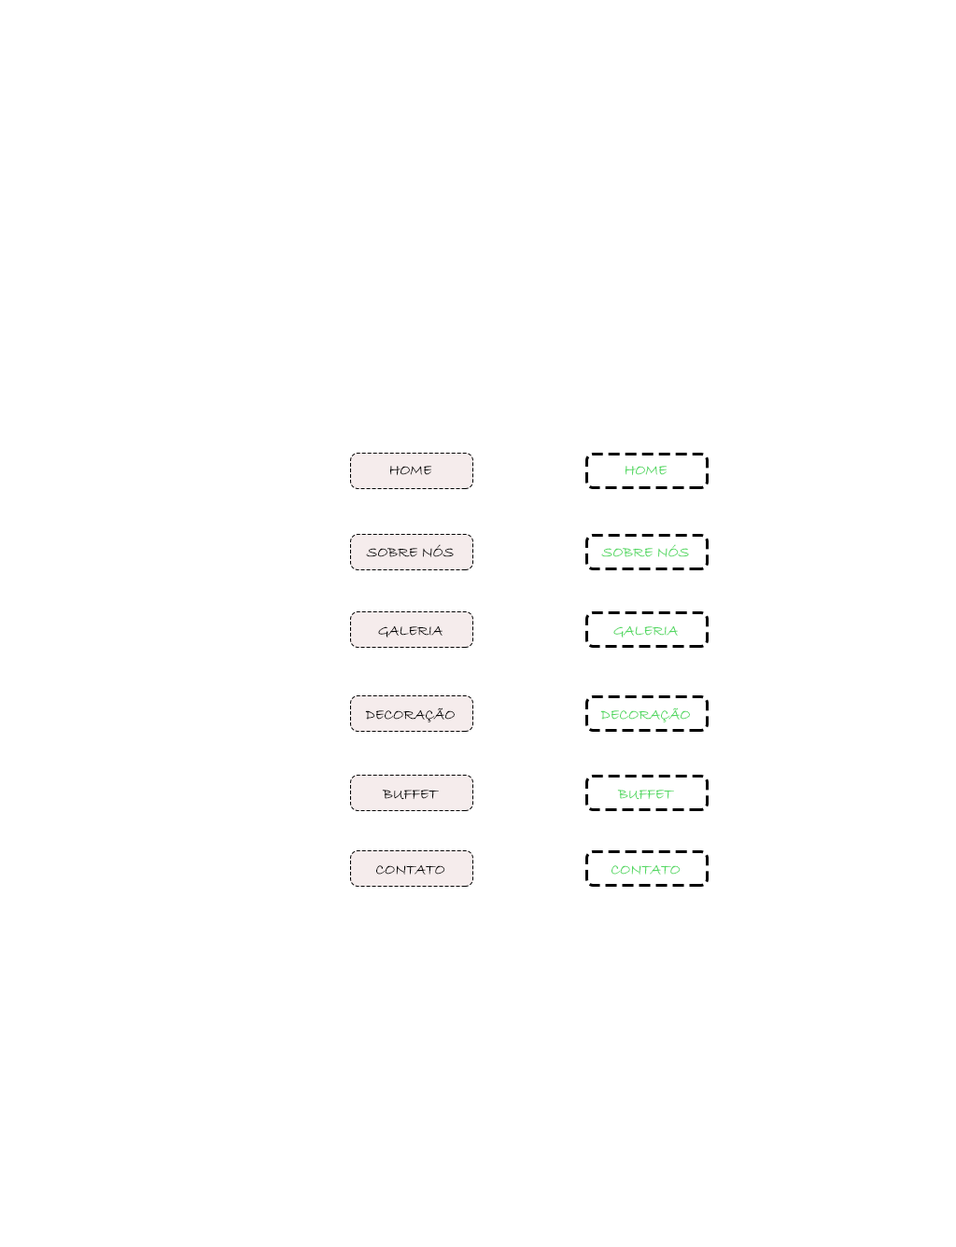
<style>
.page{position:relative;width:956px;height:1247px;background:#ffffff}
.page>*{position:absolute;margin:0}
.t1{font:14.9px "BradleyHandITC";color:#050404}
.t2{font:14.9px "BradleyHandITC";color:#50d860}
</style>
<div class="page">
<p class="t1" style="left:389px;top:466px;width:43px;height:10px">HOME</p>
<p class="t2" style="left:625px;top:466px;width:43px;height:10px">HOME</p>
<p class="t1" style="left:366px;top:544px;width:88px;height:13px">SOBRE NÓS</p>
<p class="t2" style="left:601px;top:544px;width:88px;height:13px">SOBRE NÓS</p>
<p class="t1" style="left:378px;top:626px;width:65px;height:13px">GALERIA</p>
<p class="t2" style="left:613px;top:626px;width:65px;height:13px">GALERIA</p>
<p class="t1" style="left:365px;top:708px;width:90px;height:15px">DECORAÇÃO</p>
<p class="t2" style="left:600px;top:708px;width:90px;height:15px">DECORAÇÃO</p>
<p class="t1" style="left:382px;top:790px;width:57px;height:10px">BUFFET</p>
<p class="t2" style="left:617px;top:790px;width:57px;height:10px">BUFFET</p>
<p class="t1" style="left:376px;top:865px;width:69px;height:10px">CONTATO</p>
<p class="t2" style="left:612px;top:865px;width:69px;height:10px">CONTATO</p>
</div>
